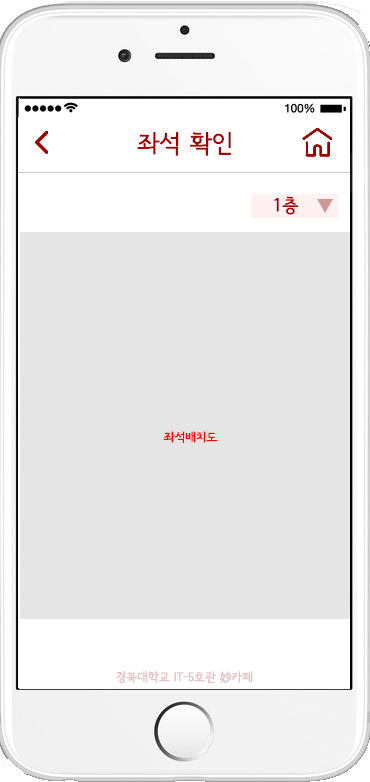
<style>
.page{position:relative;width:370px;height:782px;background:#e5e5e5}
.page>*{position:absolute;margin:0}
.t1{font:24px "SeoulNamsanL";color:#a40000;font-weight:bold}
.t2{font:18px "SeoulNamsanL";color:#a40000;font-weight:bold}
.t3{font:12.1px "SeoulNamsanB";color:#ff0000}
.t4{font:12.4px "SeoulNamsanB";color:#e2c2c2}
</style>
<div class="page">
<p class="t1" style="left:137px;top:132px;width:94px;height:24px">좌석 확인</p>
<p class="t2" style="left:274px;top:196px;width:25px;height:19px">1층</p>
<p class="t3" style="left:163px;top:431px;width:54px;height:12px">좌석배치도</p>
<p class="t4" style="left:116px;top:671px;width:137px;height:13px">경북대학교 IT-5호관 妙카페</p>
</div>
